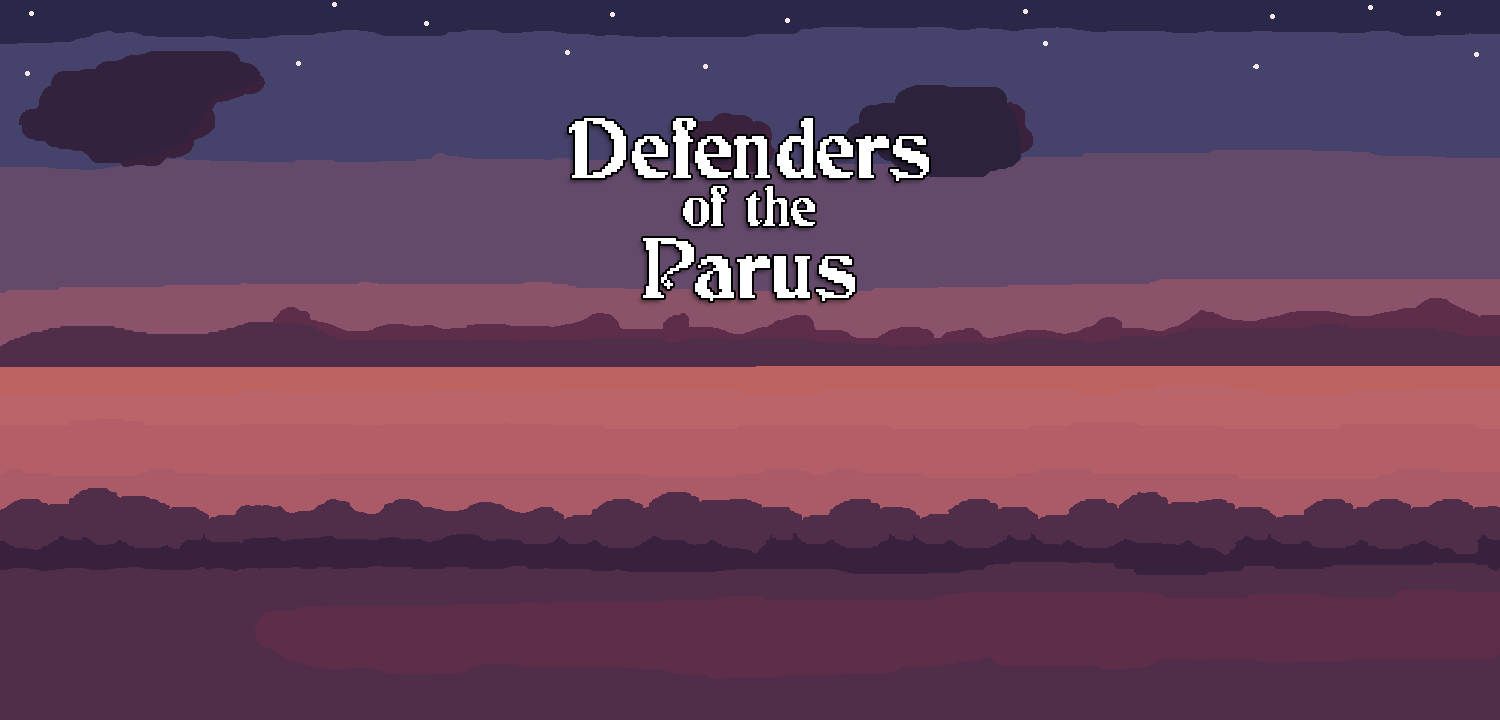
<style>
.page{position:relative;width:1500px;height:720px;background:#502d48}
.page>*{position:absolute;margin:0}
.t1{font:72px/48px "JMHCthulhumbusArcade-Regular";color:#ffffff}
.t2{font:48px/48px "JMHCthulhumbusArcade-Regular";color:#ffffff}
.t3{font:72px/72px "JMHCthulhumbusArcade-Regular";color:#ffffff}
</style>
<div class="page">
<p class="t1" style="left:569px;top:118px;width:360px;height:183px;text-align:center">Defenders<br><span class="t2">of the<br></span><span class="t3">Parus</span></p>
</div>
